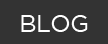
<style>
.page{position:relative;width:108px;height:44px;background:#333333}
.page>*{position:absolute;margin:0}
.t1{font:24px "GothamBook";letter-spacing:-0.02em;color:#ffffff}
</style>
<div class="page">
<p class="t1" style="left:21px;top:15px;width:67px;height:17px">BLOG   ABOUT  JOBS   TERMS</p>
</div>
